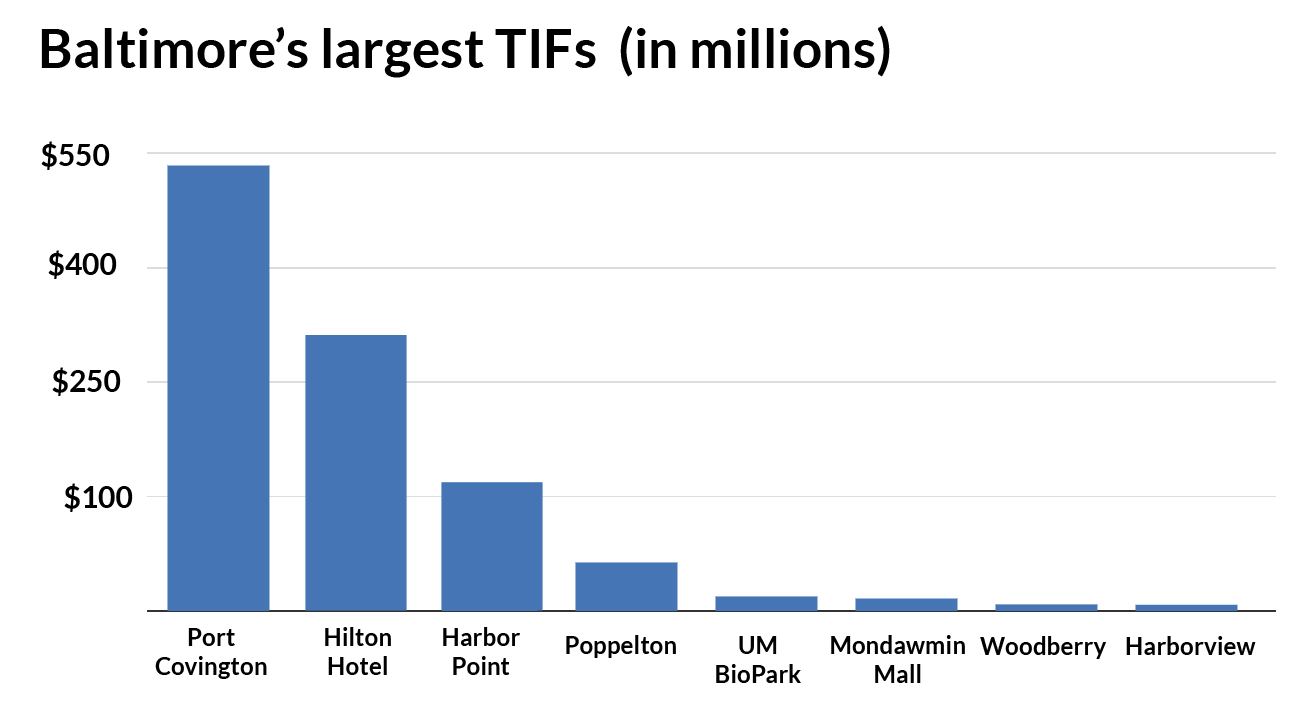
<style>
.page{position:relative;width:1291px;height:706px;background:#ffffff}
.page>*{position:absolute;margin:0}
.t1{font:53.5px "Lato-Bold";color:#000000}
.t2{font:30px "Lato-Bold";color:#000000}
.t3{font:24.3px "Lato-Bold";color:#000000}
</style>
<div class="page">
<p class="t1" style="left:41px;top:25px;width:849px;height:53px">Baltimore’s largest TIFs  (in millions)</p>
<p class="t2" style="left:41px;top:141px;width:69px;height:29px">$550</p>
<p class="t2" style="left:48px;top:250px;width:69px;height:29px">$400</p>
<p class="t2" style="left:52px;top:367px;width:69px;height:29px">$250</p>
<p class="t2" style="left:64px;top:483px;width:69px;height:29px">$100</p>
<p class="t3" style="left:155px;top:628px;width:112px;height:51px;text-align:center">Port<br>Covington</p>
<p class="t3" style="left:325px;top:627px;width:66px;height:48px;text-align:center">Hilton<br>Hotel</p>
<p class="t3" style="left:443px;top:627px;width:77px;height:48px;text-align:center">Harbor<br>Point</p>
<p class="t3" style="left:566px;top:635px;width:110px;height:23px">Poppelton</p>
<p class="t3" style="left:716px;top:636px;width:85px;height:47px;text-align:center">UM<br>BioPark</p>
<p class="t3" style="left:831px;top:635px;width:134px;height:48px;text-align:center">Mondawmin<br>Mall</p>
<p class="t3" style="left:980px;top:636px;width:126px;height:23px">Woodberry</p>
<p class="t3" style="left:1126px;top:636px;width:130px;height:19px">Harborview</p>
</div>
